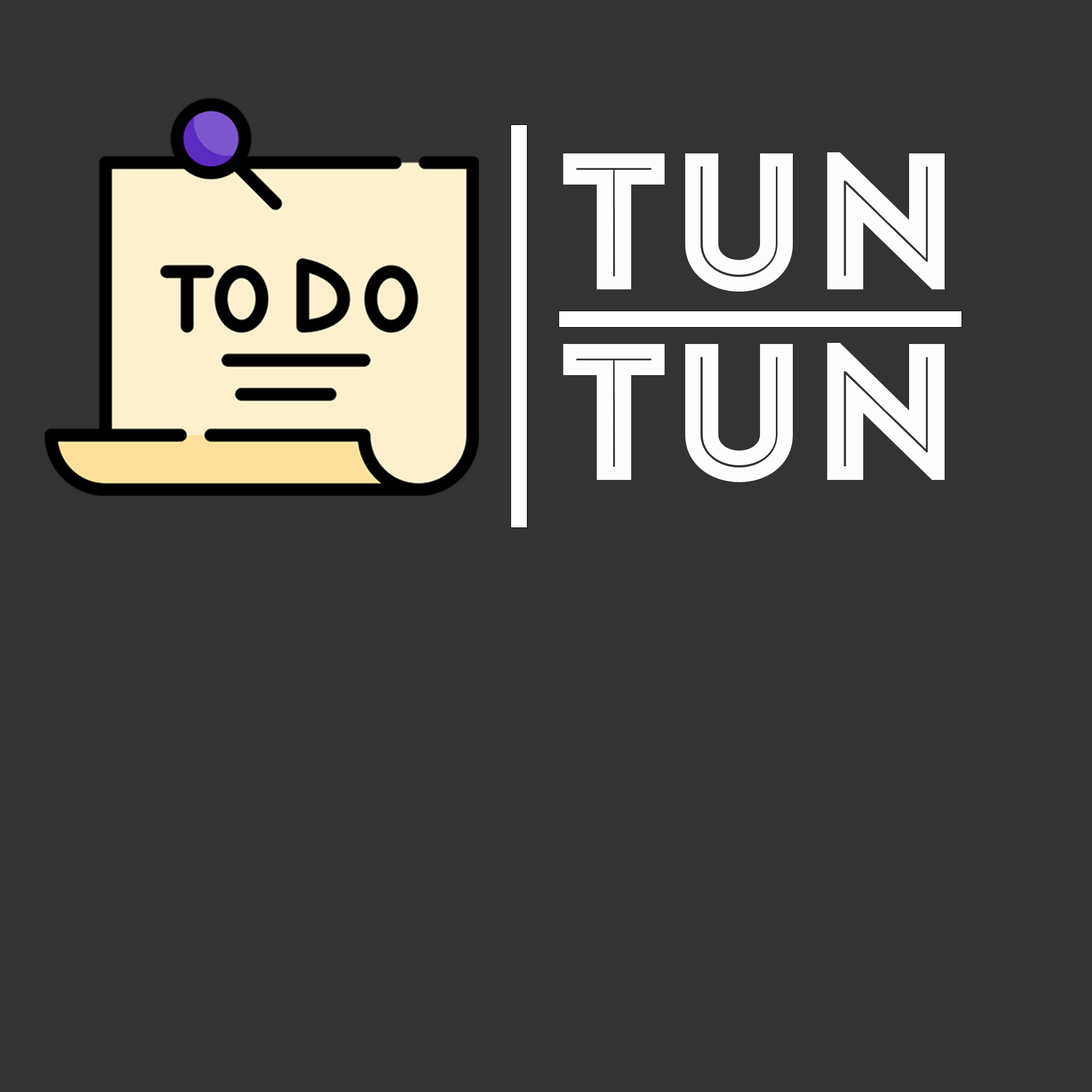
<style>
.page{position:relative;width:1092px;height:1092px;background:#333333}
.page>*{position:absolute;margin:0}
.t1{font:194.6px "Intro-Inline";color:#fdfdfd}
</style>
<div class="page">
<p class="t1" style="left:563px;top:152px;width:382px;height:140px">tun</p>
<p class="t1" style="left:563px;top:343px;width:382px;height:139px">tun</p>
</div>
